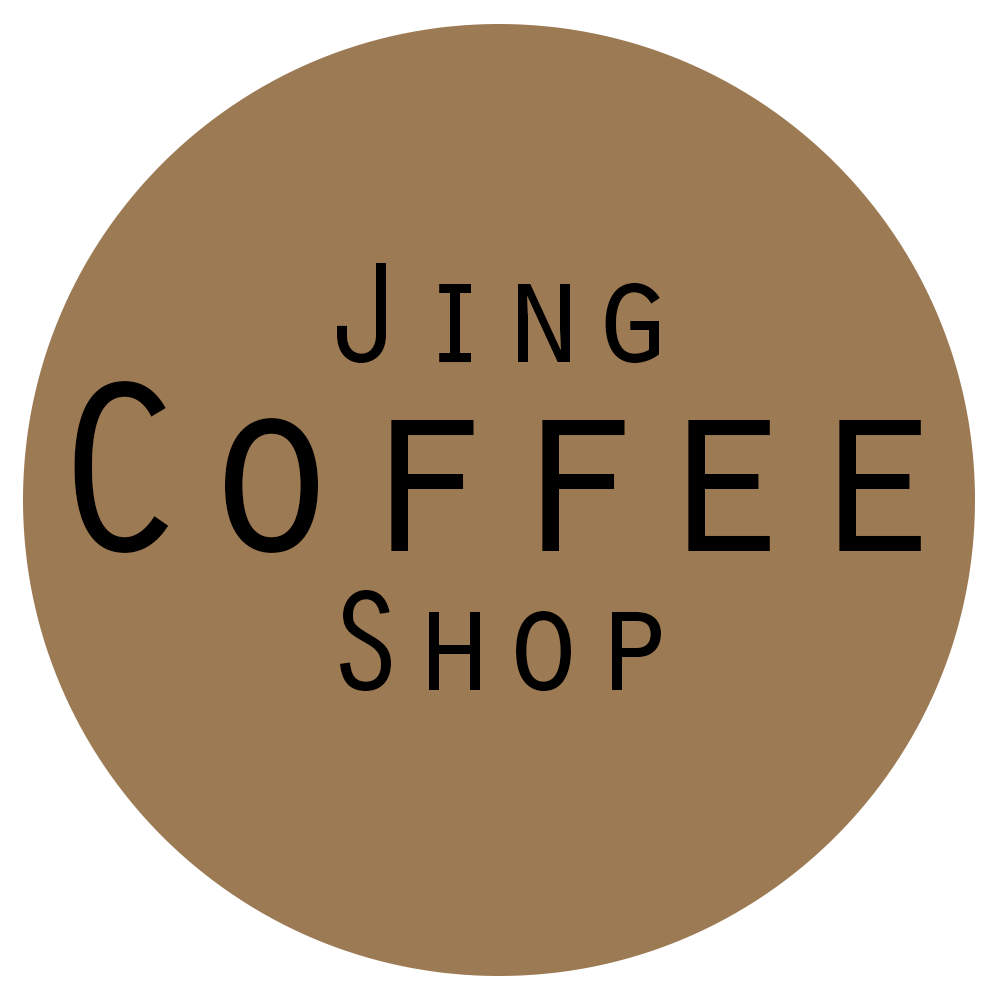
<style>
.page{position:relative;width:1000px;height:1000px;background:#9c7a54}
.page>*{position:absolute;margin:0}
.t1{font:149px "OratorStd";color:#000000}
.t2{font:251.5px "OratorStd";color:#000000}
</style>
<div class="page">
<p class="t1" style="left:337px;top:263px;width:323px;height:101px">Jing</p>
<p class="t2" style="left:74px;top:381px;width:847px;height:172px">Coffee</p>
<p class="t1" style="left:340px;top:589px;width:321px;height:103px">Shop</p>
</div>
